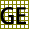
<style>
.page{position:relative;width:29px;height:29px;background:#ffffff}
.page>*{position:absolute;margin:0}
.t1{font:22px "AdobeHeitiStd-Regular";color:#000000}
</style>
<div class="page">
<p class="t1" style="left:0px;top:7px;width:26px;height:18px">GE</p>
</div>
